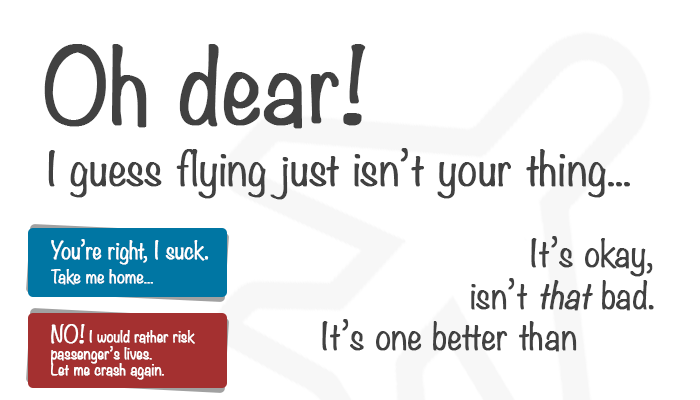
<style>
.page{position:relative;width:700px;height:400px;background:#ffffff}
.page>*{position:absolute;margin:0}
.t1{font:91.7px "Noteworthy-Light";color:#414141;font-weight:bold}
.t2{font:41.7px "Noteworthy-Light";color:#414141;font-weight:bold}
.t3{font:20.8px/29.2px "Noteworthy-Light";color:#ffffff;font-weight:bold}
.t4{font:16.7px/25px "Noteworthy-Light";color:#ffffff;font-weight:bold}
.t5{font:33.3px/41.7px "Noteworthy-Light";color:#414141;font-weight:bold}
.t6{font:33.3px/41.7px "Noteworthy-Light";color:#414141;font-weight:bold;font-style:italic}
.t7{font:14.6px/16.7px "Noteworthy-Light";color:#ffffff;font-weight:bold}
.t8{font:20.8px/20.8px "Noteworthy-Light";color:#ffffff;font-weight:bold}
.t9{font:14.6px/20.8px "Noteworthy-Light";color:#ffffff;font-weight:bold}
</style>
<div class="page">
<p class="t1" style="left:44px;top:44px;width:322px;height:85px">Oh dear!</p>
<p class="t2" style="left:48px;top:148px;width:582px;height:52px">I guess flying just isn’t your thing...</p>
<p class="t3" style="left:51px;top:239px;width:158px;height:46px">You’re right, I suck.<br><span class="t4">Take me home...</span></p>
<p class="t5" style="left:322px;top:236px;width:332px;height:116px;text-align:right">It’s okay,<br>isn’t <span class="t6">that </span>bad.<br>It’s one better than</p>
<p class="t7" style="left:51px;top:324px;width:144px;height:56px"><span class="t8">NO!</span><span class="t9"> I would rather </span>risk<br>passenger’s lives.<br>Let me crash again.</p>
</div>
